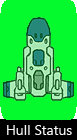
<style>
.page{position:relative;width:77px;height:140px;background:#05fa2d}
.page>*{position:absolute;margin:0}
.t1{font:14px "MicrosoftTaiLe";color:#fafafa}
</style>
<div class="page">
<p class="t1" style="left:7px;top:125px;width:65px;height:10px">Hull Status</p>
</div>
